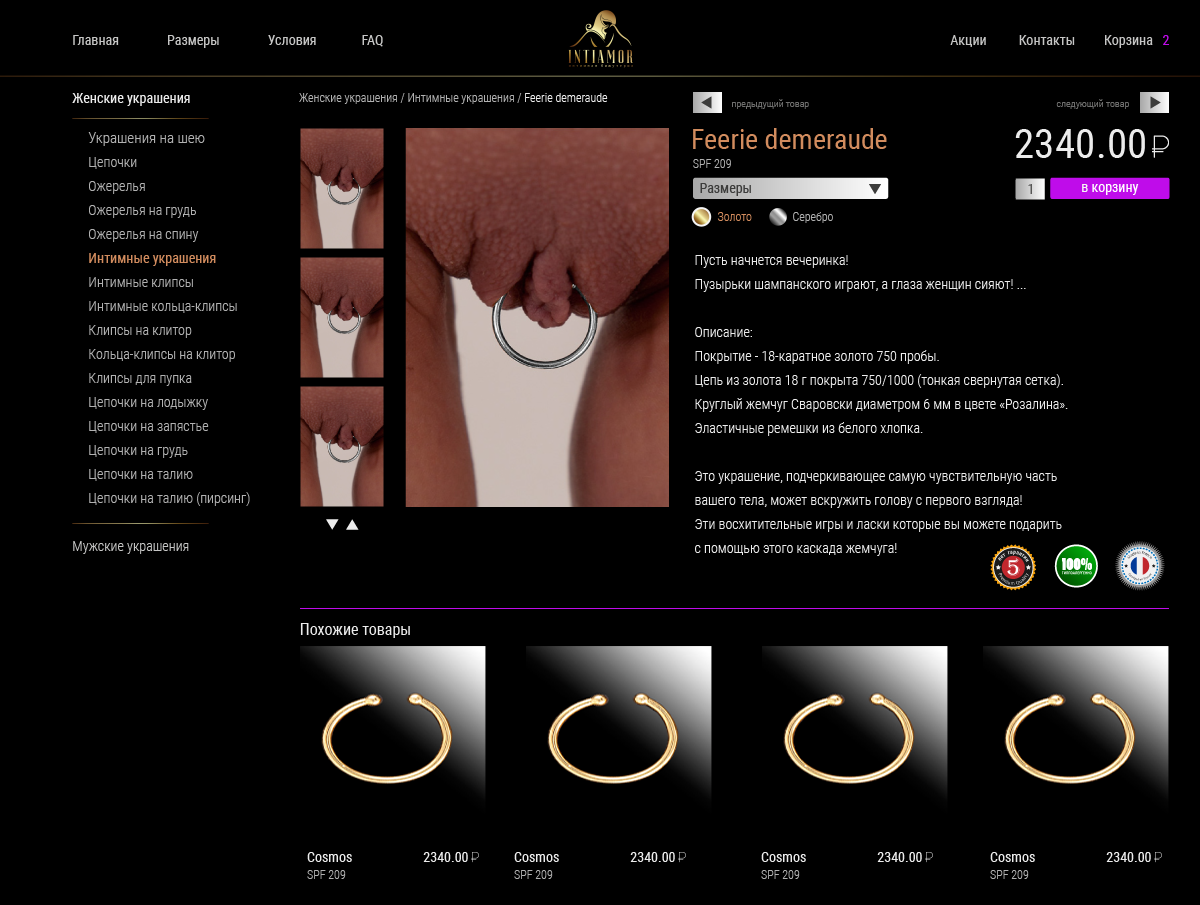
<style>
.page{position:relative;width:1200px;height:905px;background:#000000}
.page>*{position:absolute;margin:0}
.t1{font:14px "RobotoCondensed-Regular";color:#c6c6c5}
.t2{font:14px "RobotoCondensed-Regular";color:#bf0cea}
.t3{font:14px "RobotoCondensed-Regular";color:#ececec}
.t4{font:12px "RobotoCondensed-Light";color:#b1b1b1}
.t5{font:12px "RobotoCondensed-Light";color:#ececec}
.t6{font:10px "RobotoCondensed-Light";color:#6f6f6e}
.t7{font:14px/24px "RobotoCondensed-Light";color:#b1b1b1}
.t8{font:15px/24px "RobotoCondensed-Light";color:#b1b1b1}
.t9{font:14px/24px "RobotoCondensed-Regular";color:#d28c5e}
.t10{font:28px "RobotoCondensed-Regular";color:#d28c5e}
.t11{font:41.5px "RobotoCondensed-Regular";color:#ececec}
.t12{font:14px "RobotoCondensed-Regular";color:#3c3c3b}
.t13{font:14px "RobotoCondensed-Regular";color:#575756}
.t14{font:14px "RobotoCondensed-Regular";color:#ffffff}
.t15{font:14px "RobotoCondensed-Regular";color:#f5f5f5}
.t16{font:12px "RobotoCondensed-Light";color:#d28c5e}
.t17{font:14px/24px "RobotoCondensed-Light";color:#ececec}
.t18{font:14px "RobotoCondensed-Light";color:#c6c6c5}
.t19{font:16px "RobotoCondensed-Regular";color:#ececec}
</style>
<div class="page">
<p class="t1" style="left:73px;top:35px;width:310px;height:13px">Главная               Размеры               Условия              FAQ</p>
<p class="t1" style="left:950px;top:35px;width:219px;height:13px">Акции          Контакты         Корзина   <span class="t2">2</span></p>
<p class="t3" style="left:72px;top:93px;width:118px;height:13px">Женские украшения</p>
<p class="t4" style="left:299px;top:93px;width:309px;height:11px">Женские украшения / Интимные украшения / <span class="t5">Feerie demeraude</span></p>
<p class="t6" style="left:732px;top:99px;width:77px;height:10px">предыдущий товар</p>
<p class="t6" style="left:1056px;top:99px;width:73px;height:10px">следующий товар</p>
<p class="t7" style="left:88px;top:132px;width:162px;height:374px"><span class="t8">Украшения на шею<br></span>Цепочки <br>Ожерелья <br>Ожерелья на грудь<br>Ожерелья на спину<br><span class="t9">Интимные украшения<br></span>Интимные клипсы<br>Интимные кольца-клипсы <br>Клипсы на клитор<br>Кольца-клипсы на клитор<br>Клипсы для пупка<br>Цепочки на лодыжку<br>Цепочки на запястье<br>Цепочки на грудь<br>Цепочки на талию <br>Цепочки на талию (пирсинг)</p>
<p class="t10" style="left:693px;top:128px;width:194px;height:21px">Feerie demeraude</p>
<p class="t11" style="left:1015px;top:129px;width:130px;height:29px">2340.00</p>
<p class="t4" style="left:693px;top:159px;width:38px;height:9px">SPF 209</p>
<p class="t12" style="left:700px;top:183px;width:51px;height:13px">Размеры</p>
<p class="t13" style="left:1028px;top:184px;width:4px;height:10px">1</p>
<p class="t14" style="left:1082px;top:184px;width:57px;height:11px"><span class="t15">в </span>корзину</p>
<p class="t16" style="left:717px;top:212px;width:35px;height:9px">Золото</p>
<p class="t4" style="left:793px;top:212px;width:40px;height:11px">Серебро</p>
<p class="t17" style="left:695px;top:255px;width:373px;height:301px">Пусть начнется вечеринка! <br>Пузырьки шампанского играют, а глаза женщин сияют! ...<br><br>Описание:<br>Покрытие - 18-каратное золото 750 пробы. <br>Цепь из золота 18 г покрыта 750/1000 (тонкая свернутая сетка). <br>Круглый жемчуг Сваровски диаметром 6 мм в цвете «Розалина». <br>Эластичные ремешки из белого хлопка.<br><br>Это украшение, подчеркивающее самую чувствительную часть <br>вашего тела, может вскружить голову с первого взгляда! <br>Эти восхитительные игры и ласки которые вы можете подарить <br>с помощью этого каскада жемчуга!</p>
<p class="t18" style="left:73px;top:541px;width:116px;height:13px">Мужские украшения</p>
<p class="t19" style="left:300px;top:623px;width:110px;height:15px">Похожие товары</p>
<p class="t3" style="left:307px;top:852px;width:45px;height:10px">Cosmos</p>
<p class="t3" style="left:423px;top:852px;width:45px;height:10px">2340.00</p>
<p class="t3" style="left:514px;top:852px;width:45px;height:10px">Cosmos</p>
<p class="t3" style="left:630px;top:852px;width:45px;height:10px">2340.00</p>
<p class="t3" style="left:761px;top:852px;width:45px;height:10px">Cosmos</p>
<p class="t3" style="left:877px;top:852px;width:45px;height:10px">2340.00</p>
<p class="t3" style="left:990px;top:852px;width:45px;height:10px">Cosmos</p>
<p class="t3" style="left:1106px;top:852px;width:45px;height:10px">2340.00</p>
<p class="t4" style="left:307px;top:870px;width:39px;height:9px">SPF 209</p>
<p class="t4" style="left:514px;top:870px;width:39px;height:9px">SPF 209</p>
<p class="t4" style="left:761px;top:870px;width:39px;height:9px">SPF 209</p>
<p class="t4" style="left:990px;top:870px;width:39px;height:9px">SPF 209</p>
</div>
